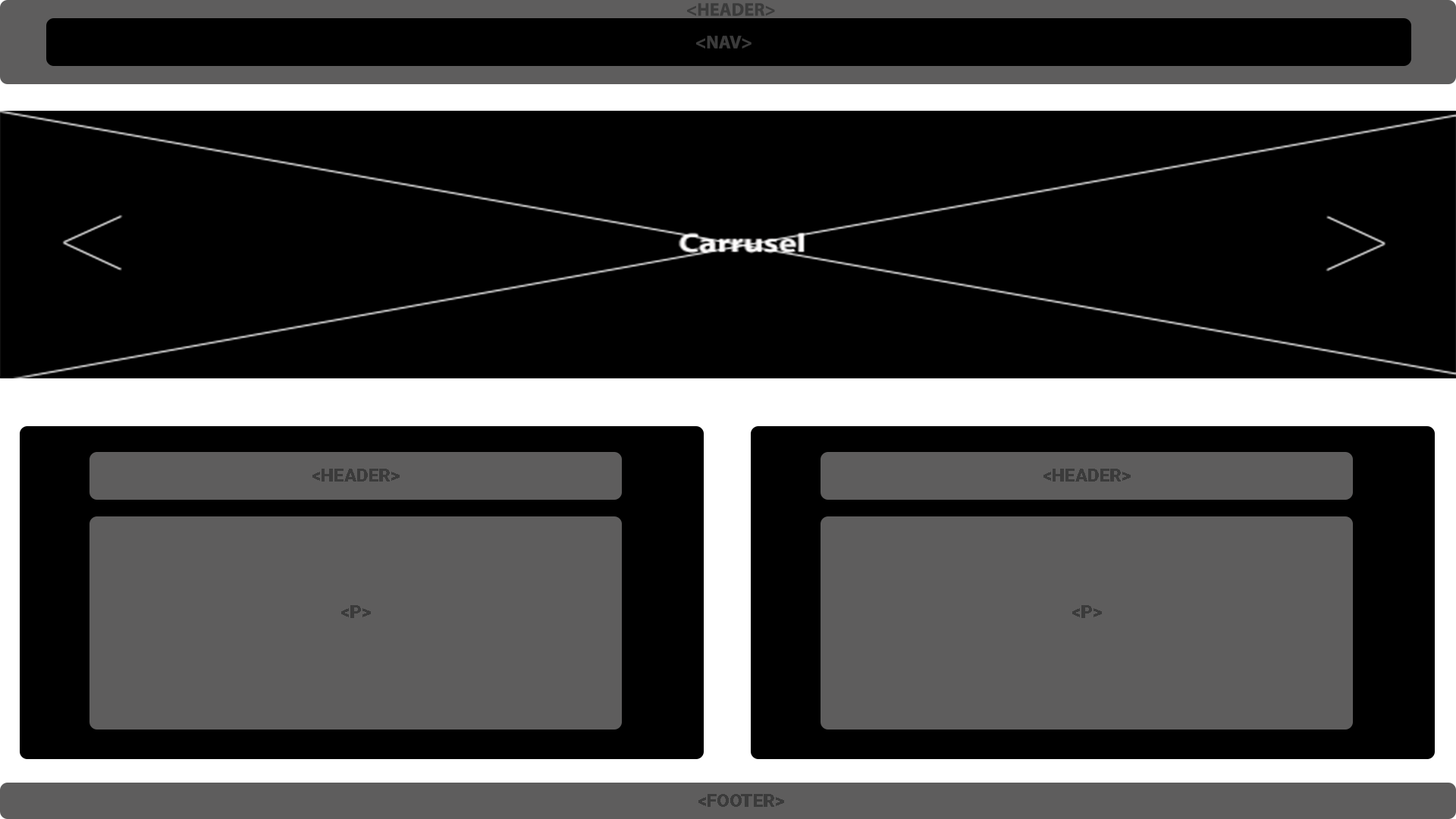
<style>
.page{position:relative;width:1456px;height:819px;background:#000000}
.page>*{position:absolute;margin:0}
.t1{font:18.3px "MyriadPro-Bold";color:#3b3b3b}
.t2{font:18.3px "Roboto-Black";color:#3b3b3b}
</style>
<div class="page">
<p class="t1" style="left:687px;top:3px;width:88px;height:13px">&lt;HEADER&gt;</p>
<p class="t1" style="left:696px;top:36px;width:55px;height:13px">&lt;NAV&gt;</p>
<p class="t2" style="left:312px;top:469px;width:88px;height:13px">&lt;HEADER&gt;</p>
<p class="t2" style="left:1043px;top:469px;width:88px;height:13px">&lt;HEADER&gt;</p>
<p class="t2" style="left:341px;top:605px;width:30px;height:13px">&lt;P&gt;</p>
<p class="t2" style="left:1072px;top:605px;width:30px;height:13px">&lt;P&gt;</p>
<p class="t2" style="left:698px;top:794px;width:86px;height:13px">&lt;FOOTER&gt;</p>
</div>
